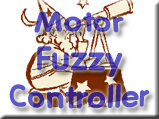
<style>
.page{position:relative;width:159px;height:119px;background:#ffffff}
.page>*{position:absolute;margin:0}
.t1{font:30px "VNI-Vari";scale:1.07 1}
</style>
<div class="page">
<p class="t1" style="left:9px;top:11px;width:141px;height:98px;text-align:center">Motor <br>Fuzzy<br>Controller</p>
</div>
